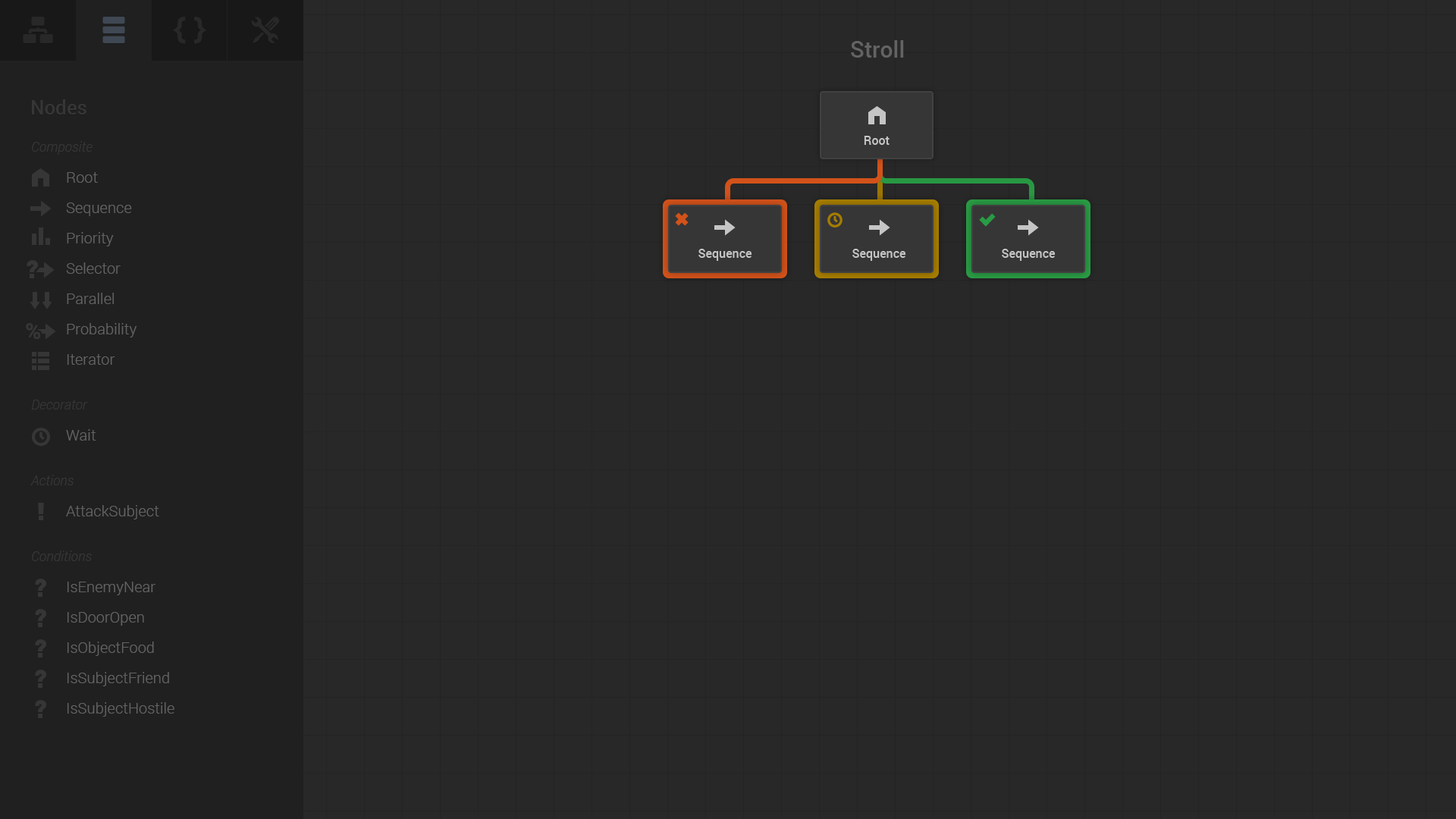
<style>
.page{position:relative;width:1456px;height:819px;background:#282828}
.page>*{position:absolute;margin:0}
.t1{font:22.7px "Roboto-Medium";color:#646363}
.t2{font:19.7px "Roboto-Medium";color:#363636}
.t3{font:13.6px "Roboto-LightItalic";color:#363636}
.t4{font:15.2px/30.3px "Roboto-Light";color:#636363}
</style>
<div class="page">
<p class="t1" style="left:851px;top:40px;width:53px;height:18px">Stroll</p>
<p class="t2" style="left:32px;top:99px;width:54px;height:16px">Nodes</p>
<p class="t3" style="left:32px;top:141px;width:61px;height:14px">Composite</p>
<p class="t4" style="left:66px;top:172px;width:108px;height:545px">Root<br>Sequence<br>Priority<br>Selector<br>Parallel<br>Probability<br>Iterator<br><br>Wait<br><br>AttackSubject<br><br>IsEnemyNear<br>IsDoorOpen<br>IsObjectFood<br>IsSubjectFriend<br>IsSubjectHostile</p>
<p class="t3" style="left:31px;top:400px;width:57px;height:9px">Decorator</p>
<p class="t3" style="left:30px;top:475px;width:44px;height:10px">Actions</p>
<p class="t3" style="left:32px;top:551px;width:60px;height:10px">Conditions</p>
</div>
